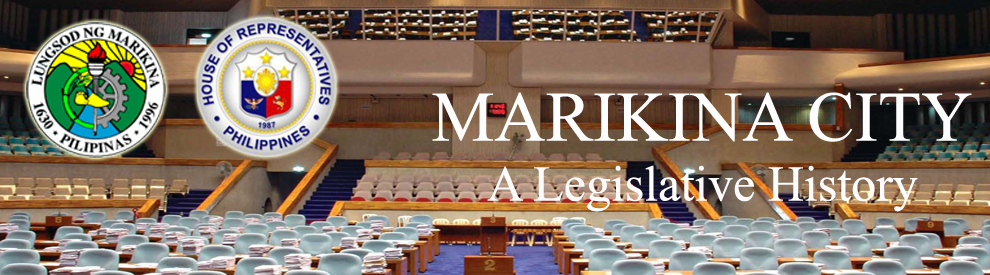
<style>
.page{position:relative;width:990px;height:275px}
.page>*{position:absolute;margin:0}
.t1{font:50px "TimesNewRomanPSMT";color:#fdfcfc}
.t2{font:70.8px "TimesNewRomanPSMT";color:#fdfdfd}
</style>
<div class="page">
<p class="t1" style="left:432px;top:92px;width:540px;height:120px;text-align:center"><span class="t2">MARIKINA CITY<br></span>A Legislative History</p>
</div>
